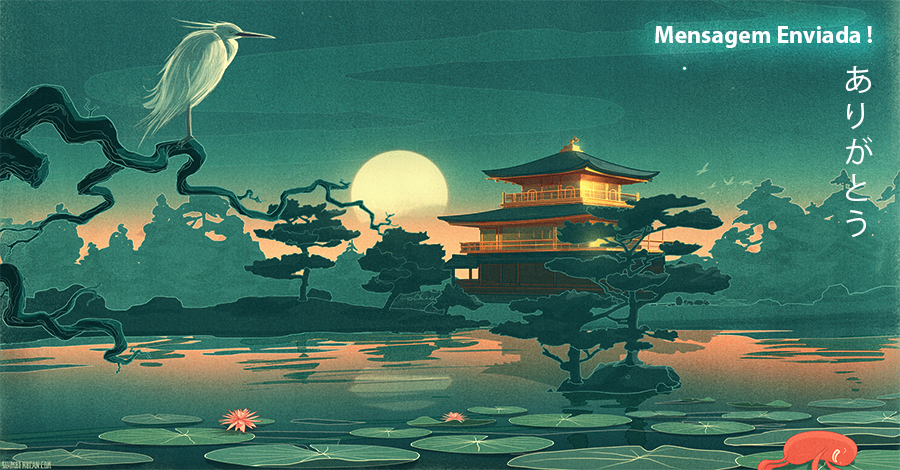
<style>
.page{position:relative;width:900px;height:470px}
.page>*{position:absolute;margin:0}
.t1{font:24px "MyriadPro-Bold";color:#fcffff}
.t2{font:30px "KozGoPr6N-Regular";color:#fcffff}
</style>
<div class="page">
<p class="t1" style="left:655px;top:26px;width:217px;height:22px">Mensagem Enviada !</p>
<p class="t2" style="left:845px;top:66px;width:28px;height:171px">あ<br>り<br>が<br>と<br>う</p>
</div>
